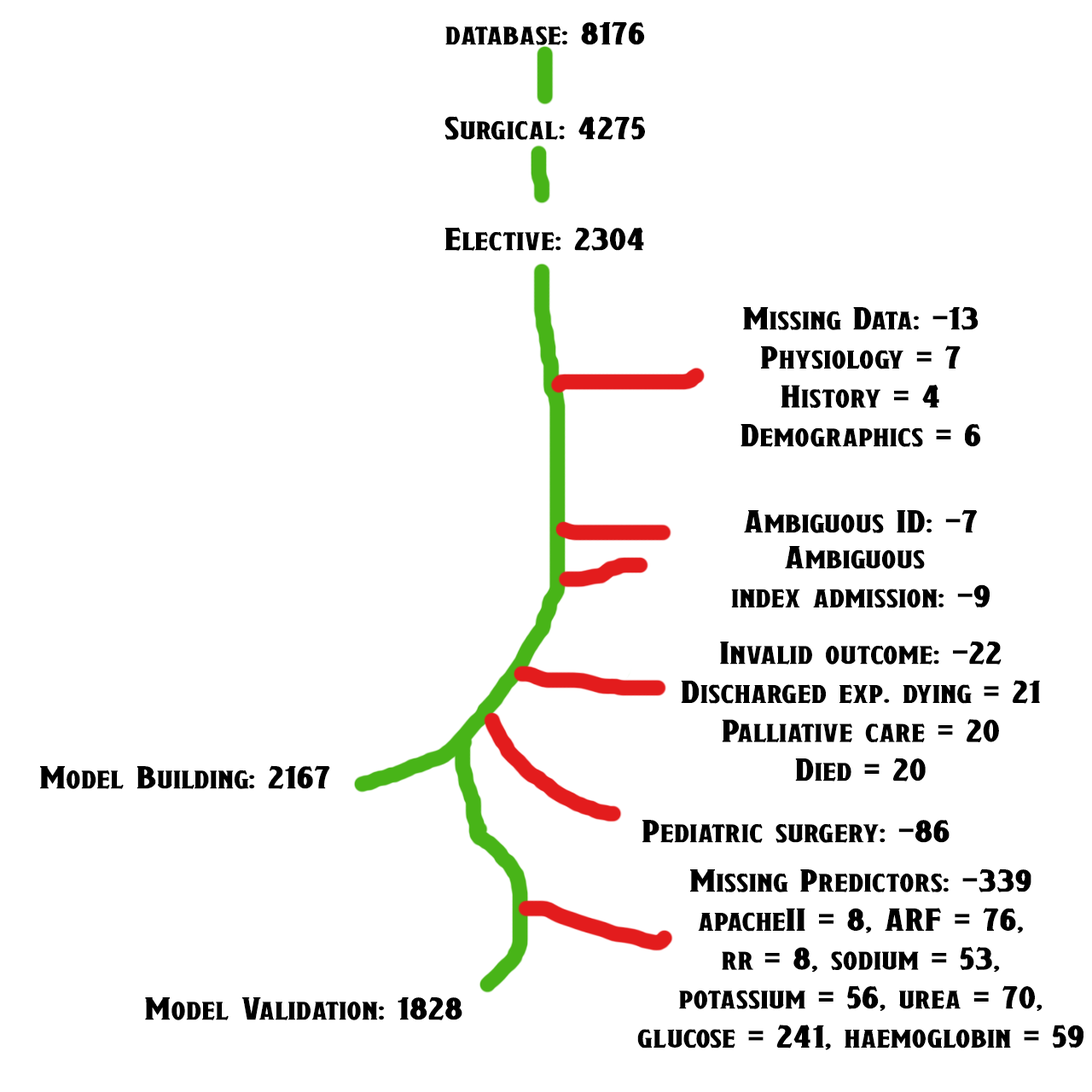
<style>
.page{position:relative;width:1092px;height:1092px;background:#ffffff}
.page>*{position:absolute;margin:0}
.t1{font:32.4px "Draconis";color:#000000;scale:1.28 1}
</style>
<div class="page">
<p class="t1" style="left:445px;top:21px;width:200px;height:24px">database: 8176</p>
<p class="t1" style="left:444px;top:116px;width:201px;height:24px">Surgical: 4275</p>
<p class="t1" style="left:444px;top:227px;width:200px;height:24px">Elective: 2304</p>
<p class="t1" style="left:741px;top:306px;width:240px;height:141px;text-align:center">Missing Data: -13<br>Physiology = 7<br>History = 4<br>Demographics = 6</p>
<p class="t1" style="left:744px;top:509px;width:234px;height:24px">Ambiguous ID: -7</p>
<p class="t1" style="left:731px;top:546px;width:259px;height:62px;text-align:center">Ambiguous <br>index admission: -9</p>
<p class="t1" style="left:681px;top:641px;width:359px;height:140px;text-align:center">Invalid outcome: -22<br>Discharged exp. dying = 21<br>Palliative care = 20<br>Died = 20</p>
<p class="t1" style="left:40px;top:765px;width:290px;height:24px">Model Building: 2167</p>
<p class="t1" style="left:642px;top:820px;width:308px;height:23px">Pediatric surgery: -86</p>
<p class="t1" style="left:637px;top:868px;width:446px;height:182px;text-align:center">Missing Predictors: -339<br>apacheII = 8, ARF = 76,<br>rr = 8, sodium = 53,<br>potassium = 56, urea = 70,<br>glucose = 241, haemoglobin = 59</p>
<p class="t1" style="left:145px;top:996px;width:317px;height:24px">Model Validation: 1828</p>
</div>
